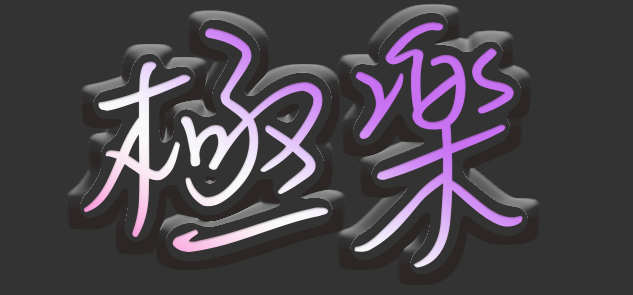
<style>
.page{position:relative;width:633px;height:295px;background:#333333}
.page>*{position:absolute;margin:0}
.t1{font:291.7px "MLingWaiMedium-SC";letter-spacing:0.02em;text-transform:uppercase}
</style>
<div class="page">
<p class="t1" style="left:83px;top:22px;width:440px;height:246px">極楽</p>
</div>
